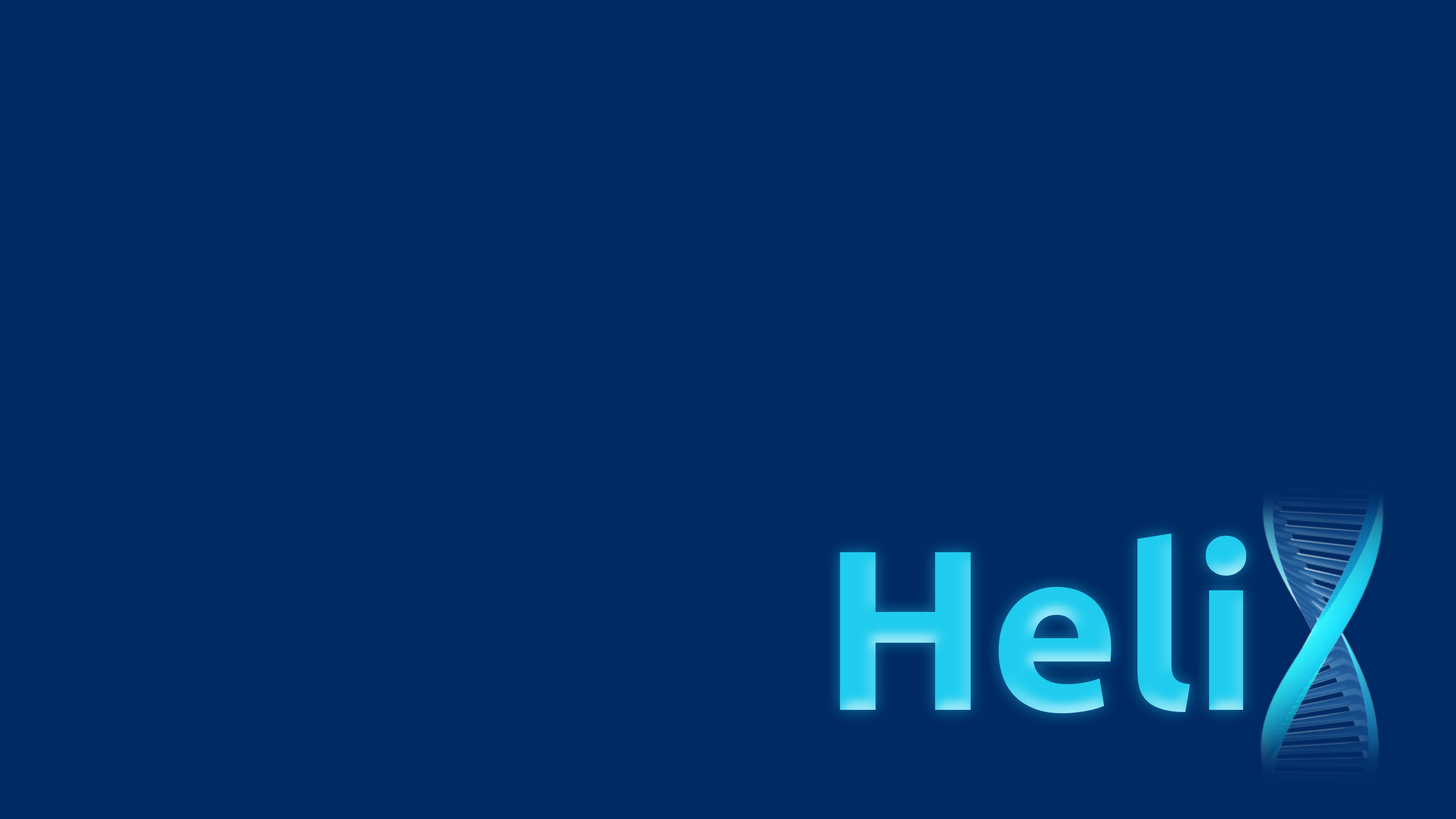
<style>
.page{position:relative;width:1456px;height:819px;background:#002a63}
.page>*{position:absolute;margin:0}
.t1{font:227.5px "Ubuntu-Bold";color:#20ccee}
</style>
<div class="page">
<p class="t1" style="left:839px;top:533px;width:408px;height:180px">Heli</p>
</div>
